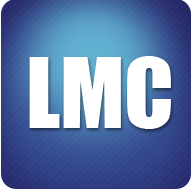
<style>
.page{position:relative;width:192px;height:192px;background:#ffffff}
.page>*{position:absolute;margin:0}
.t1{font:90px "Impact";color:#ffffff}
</style>
<div class="page">
<p class="t1" style="left:29px;top:56px;width:142px;height:73px">LMC</p>
</div>
